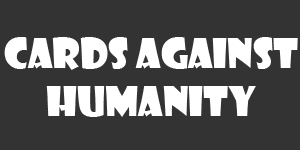
<style>
.page{position:relative;width:300px;height:150px;background:#333333}
.page>*{position:absolute;margin:0}
.t1{font:40px "ShowcardGothic-Reg";color:#ffffff}
</style>
<div class="page">
<p class="t1" style="left:4px;top:37px;width:294px;height:80px;text-align:center">Cards Against<br>Humanity</p>
</div>
